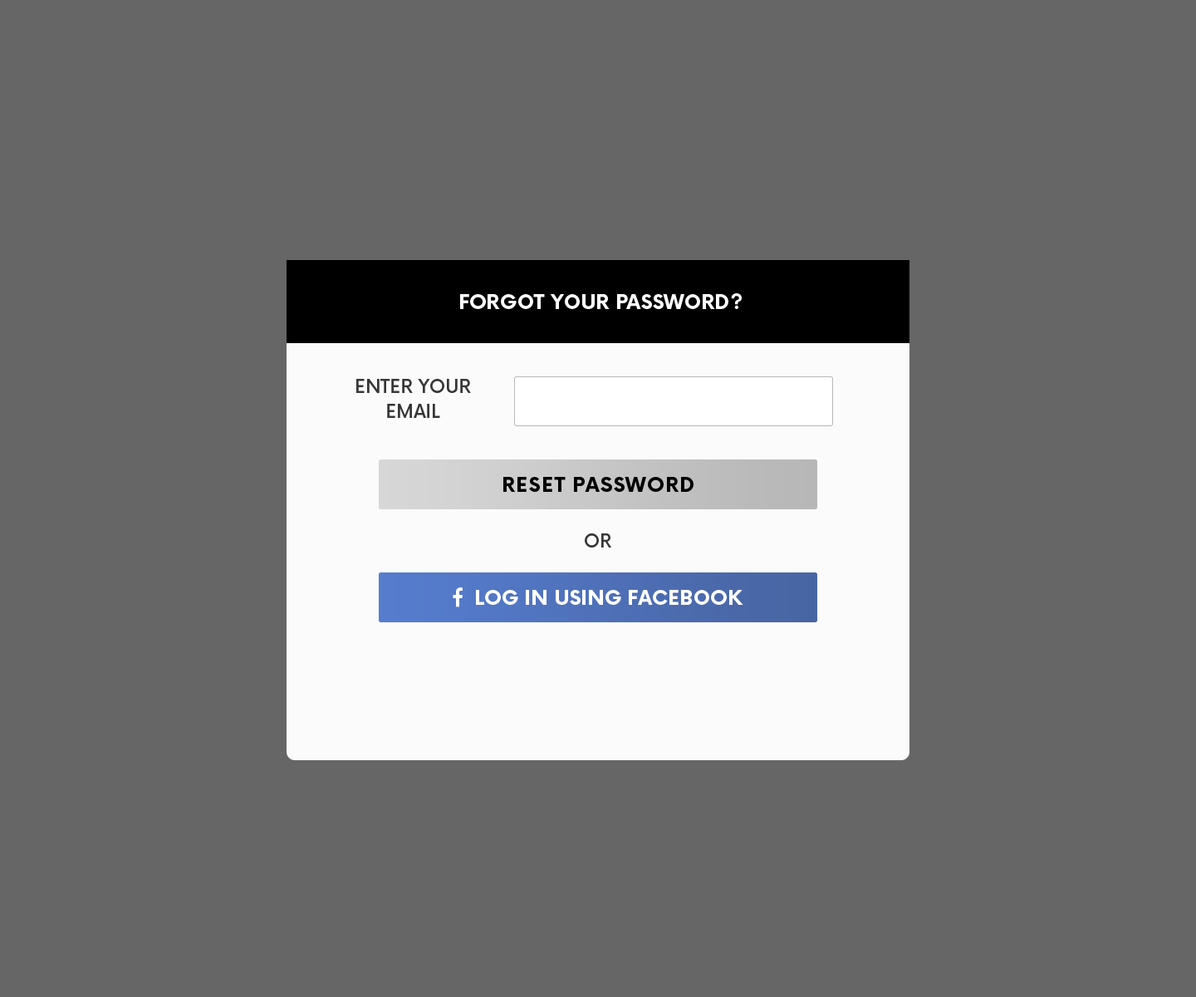
<style>
.page{position:relative;width:1196px;height:997px;background:#666666}
.page>*{position:absolute;margin:0}
.t1{font:19.9px "Now-Bold";color:#ffffff}
.t2{font:18.3px/24.9px "Now-Medium";color:#363636}
.t3{font:19.9px "Now-Bold";letter-spacing:0.05em;color:#000000;text-transform:uppercase}
.t4{font:18.3px "Now-Medium";color:#363636}
.t5{font:19.9px "Now-Bold";color:#ffffff;text-transform:uppercase}
</style>
<div class="page">
<p class="t1" style="left:460px;top:293px;width:282px;height:16px">FORGOT YOUR PASSWORD?</p>
<p class="t2" style="left:356px;top:379px;width:115px;height:39px;text-align:center">ENTER YOUR<br>EMAIL</p>
<p class="t3" style="left:503px;top:477px;width:191px;height:15px">RESET PASSWORD</p>
<p class="t4" style="left:585px;top:533px;width:26px;height:14px">OR</p>
<p class="t5" style="left:476px;top:590px;width:267px;height:15px">Log In Using Facebook</p>
</div>
